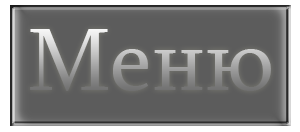
<style>
.page{position:relative;width:300px;height:132px;background:#5c5c5c}
.page>*{position:absolute;margin:0}
.t1{font:91.1px "Sylfaen"}
</style>
<div class="page">
<p class="t1" style="left:30px;top:29px;width:241px;height:62px">Меню</p>
</div>
